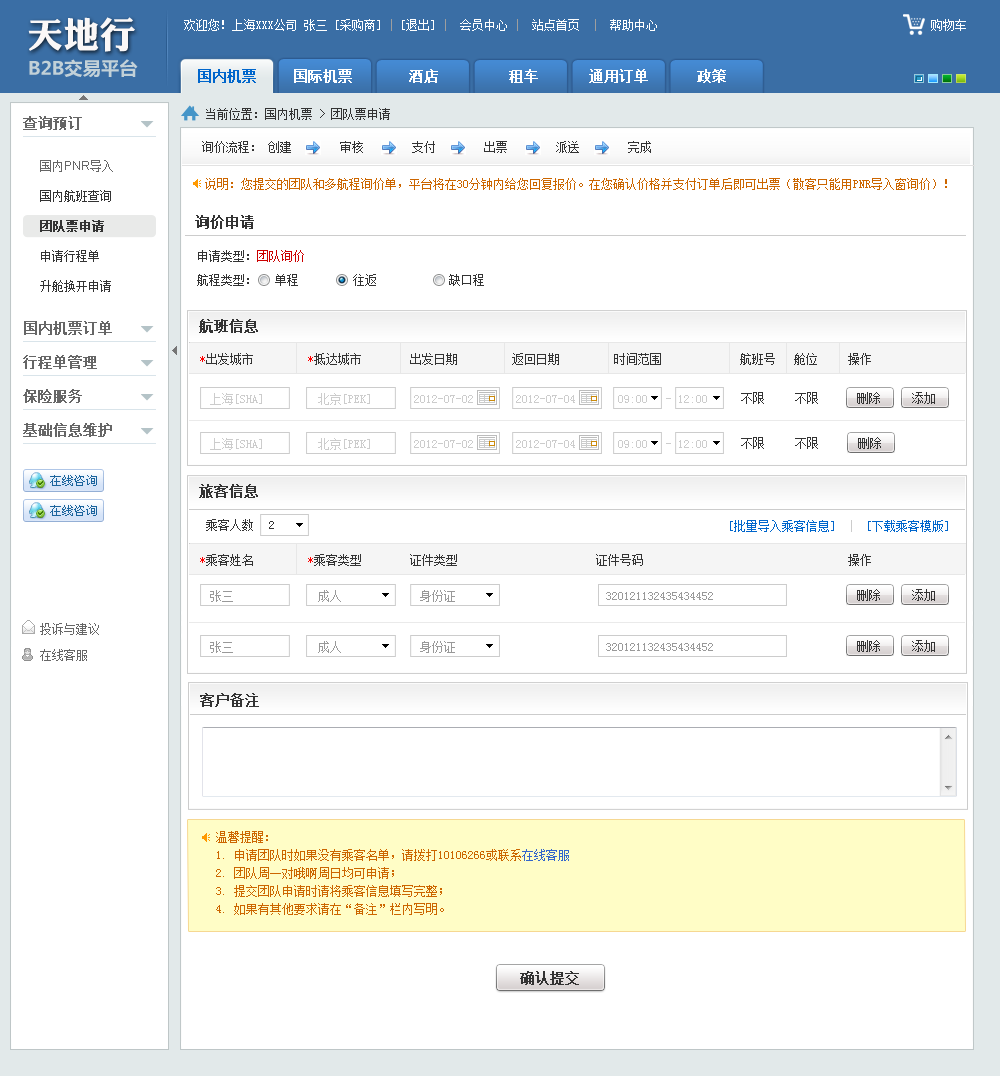
<style>
.page{position:relative;width:1000px;height:1076px;background:#ffffff}
.page>*{position:absolute;margin:0}
.t1{font:36.2px "DFPLiJinHeiW8";color:#faf7f7}
.t2{font:12px "SimSun";color:#ffffff}
.t3{font:12px "SimSun";color:#9e9e9e}
.t4{font:18.3px "MicrosoftYaHei-Bold";color:#c2d1d8}
.t5{font:14px "SimSun";color:#ffffff;font-weight:bold}
.t6{font:14px "SimSun";color:#0066cc;font-weight:bold}
.t7{font:12px "SimSun";color:#333333}
.t8{font:14px "SimSun";color:#666666;font-weight:bold}
.t9{font:12px "ArialMT";color:#666666}
.t10{font:12px "SimSun";color:#666666}
.t11{font:12px "SimSun";color:#cc6600}
.t12{font:12px/30px "SimSun";color:#333333}
.t13{font:12px/30px "SimSun";color:#333333;font-weight:bold}
.t14{font:14px "SimSun";color:#333333;font-weight:bold}
.t15{font:12px/24px "SimSun";color:#333333}
.t16{font:12px/24px "SimSun";color:#cc0000}
.t17{font:12px "SimSun";color:#ff0000}
.t18{font:12px "SimSun";color:#cccccc}
.t19{font:12px "SimSun";color:#0066cc}
.t20{font:12px "SimSun";color:#999999}
.t21{font:12px/26px "SimSun";color:#666666}
.t22{font:12px/18px "SimSun";color:#cc6600}
.t23{font:12px/18px "SimSun";color:#3366cc}
</style>
<div class="page">
<p class="t1" style="left:28px;top:17px;width:107px;height:35px">天地行</p>
<p class="t2" style="left:184px;top:19px;width:473px;height:12px">欢迎您！上海XXX公司 张三 [采购商]<span class="t3"> | </span>[退出] <span class="t3">|</span>  会员中心 <span class="t3">|</span>  站点首页  <span class="t3">|</span>  帮助中心</p>
<p class="t2" style="left:931px;top:19px;width:35px;height:12px">购物车</p>
<p class="t4" style="left:29px;top:59px;width:109px;height:19px">B2B交易平台</p>
<p class="t5" style="left:198px;top:69px;width:528px;height:14px"><span class="t6">国内机票</span>    国际机票     酒店     租车     通用订单      政策</p>
<p class="t7" style="left:206px;top:108px;width:184px;height:12px">当前位置：国内机票 &gt; 团队票申请</p>
<p class="t8" style="left:23px;top:116px;width:59px;height:14px">查询预订</p>
<p class="t7" style="left:202px;top:141px;width:52px;height:12px">询价流程：</p>
<p class="t7" style="left:268px;top:141px;width:383px;height:12px">创建  审核  支付  出票  派送  完成</p>
<p class="t9" style="left:40px;top:160px;width:73px;height:12px"><span class="t10">国内</span>PNR<span class="t10">导入</span></p>
<p class="t11" style="left:205px;top:178px;width:742px;height:12px">说明：您提交的团队和多航程询价单，平台将在30分钟内给您回复报价。在您确认价格并支付订单后即可出票（散客只能用PNR导入窗询价）！</p>
<p class="t12" style="left:40px;top:190px;width:71px;height:102px">国内航班查询<br><span class="t13">团队票申请<br></span>申请行程单<br>升舱换开申请</p>
<p class="t14" style="left:195px;top:215px;width:59px;height:14px">询价申请</p>
<p class="t15" style="left:197px;top:250px;width:287px;height:36px">申请类型：<span class="t16">团队询价<br></span>航程类型：   单程    往返  缺口程</p>
<p class="t8" style="left:24px;top:321px;width:88px;height:14px">国内机票订单</p>
<p class="t14" style="left:199px;top:319px;width:59px;height:14px">航班信息</p>
<p class="t7" style="left:200px;top:353px;width:671px;height:12px"><span class="t17">*</span>出发城市  <span class="t17">*</span>抵达城市      出发日期     返回日期    时间范围             航班号   舱位 操作</p>
<p class="t8" style="left:23px;top:355px;width:74px;height:14px">行程单管理</p>
<p class="t8" style="left:23px;top:389px;width:59px;height:14px">保险服务</p>
<p class="t18" style="left:210px;top:393px;width:497px;height:12px">上海[SHA]  北京[PEK]     2012-07-02       2012-07-04       09:00   - 12:00</p>
<p class="t7" style="left:741px;top:392px;width:77px;height:12px">不限    不限</p>
<p class="t7" style="left:857px;top:392px;width:23px;height:12px">删除</p>
<p class="t7" style="left:912px;top:392px;width:23px;height:12px">添加</p>
<p class="t8" style="left:23px;top:423px;width:89px;height:14px">基础信息维护</p>
<p class="t18" style="left:210px;top:438px;width:497px;height:12px">上海[SHA]  北京[PEK]     2012-07-02       2012-07-04       09:00   - 12:00</p>
<p class="t7" style="left:741px;top:437px;width:77px;height:12px">不限    不限</p>
<p class="t7" style="left:858px;top:437px;width:23px;height:12px">删除</p>
<p class="t14" style="left:199px;top:484px;width:59px;height:14px">旅客信息</p>
<p class="t7" style="left:206px;top:519px;width:47px;height:12px">乘客人数</p>
<p class="t7" style="left:269px;top:521px;width:5px;height:8px">2</p>
<p class="t19" style="left:730px;top:520px;width:218px;height:12px">[批量导入乘客信息]  <span class="t18">|  </span>[下载乘客模版]</p>
<p class="t7" style="left:200px;top:554px;width:671px;height:12px"><span class="t17">*</span>乘客姓名  <span class="t17">*</span>乘客类型      证件类型    证件号码      操作</p>
<p class="t20" style="left:210px;top:590px;width:503px;height:12px">张三   成人       身份证     320121132435434452</p>
<p class="t7" style="left:857px;top:589px;width:23px;height:12px">删除</p>
<p class="t7" style="left:912px;top:589px;width:23px;height:12px">添加</p>
<p class="t21" style="left:40px;top:623px;width:59px;height:38px">投诉与建议 <br>在线客服</p>
<p class="t20" style="left:210px;top:641px;width:503px;height:12px">张三   成人       身份证     320121132435434452</p>
<p class="t7" style="left:857px;top:640px;width:23px;height:12px">删除</p>
<p class="t7" style="left:912px;top:640px;width:23px;height:12px">添加</p>
<p class="t14" style="left:200px;top:693px;width:59px;height:14px">客户备注</p>
<p class="t22" style="left:216px;top:831px;width:353px;height:84px">温馨提醒：<br>1. 申请团队时如果没有乘客名单，请拨打10106266或联系<span class="t23">在线客服<br></span>2. 团队周一对哦啊周日均可申请；<br>3. 提交团队申请时请将乘客信息填写完整；<br>4. 如果有其他要求请在“备注”栏内写明。</p>
<p class="t14" style="left:520px;top:971px;width:59px;height:14px">确认提交</p>
</div>
